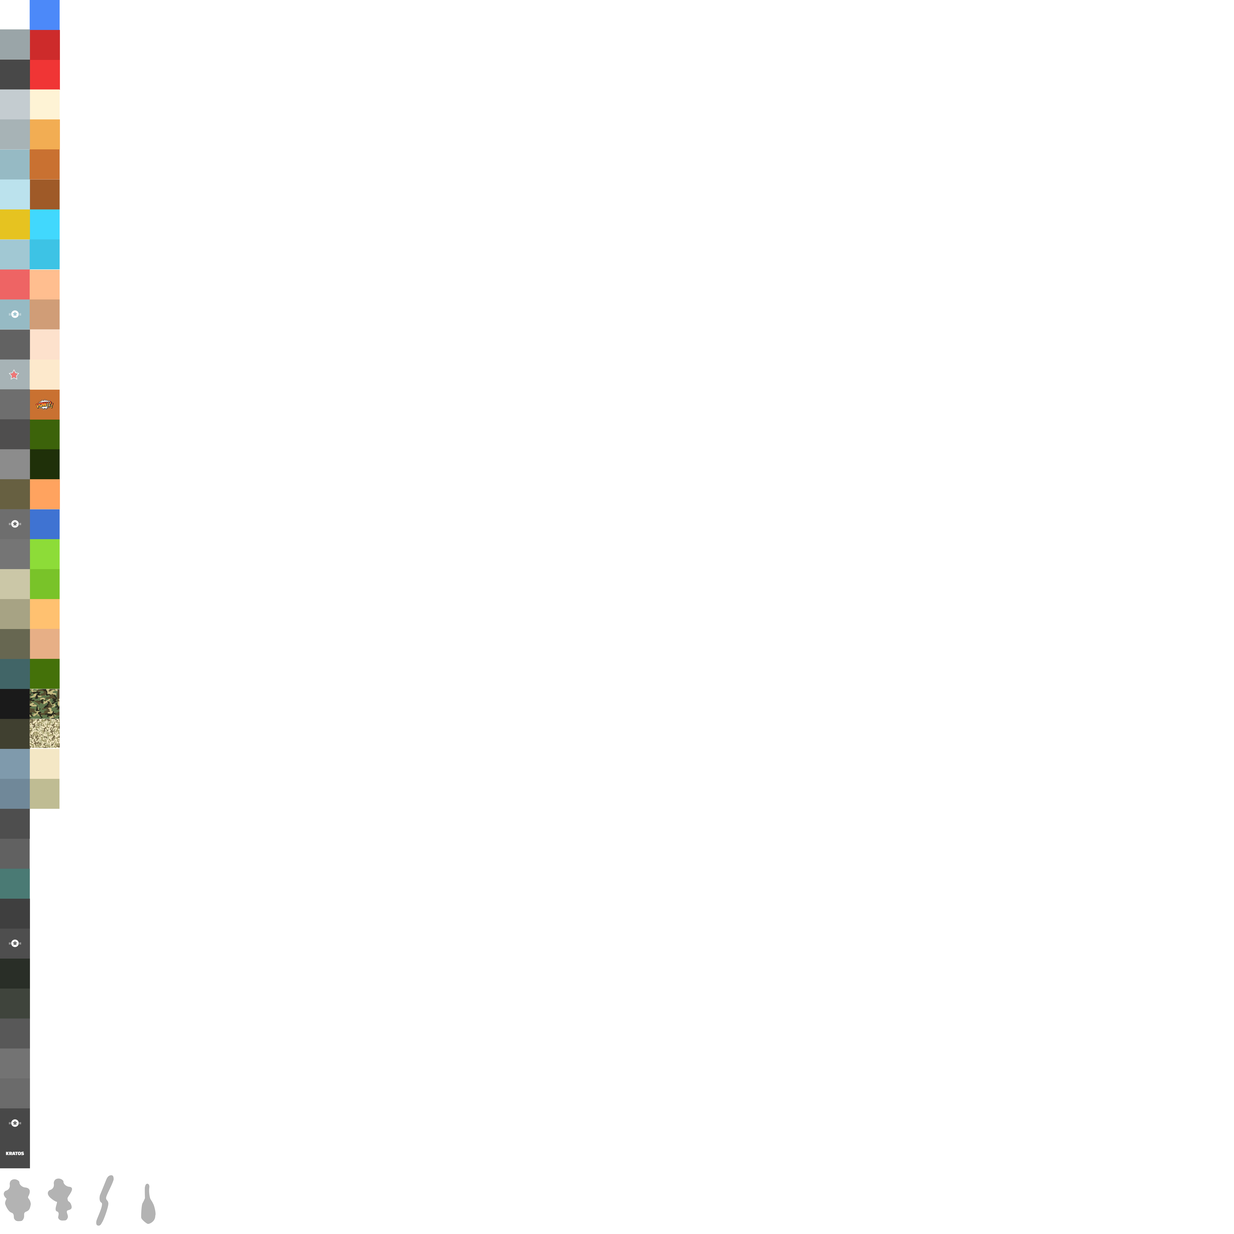
<style>
.page{position:relative;width:1234px;height:1234px;background:#ffffff}
.page>*{position:absolute;margin:0}
.t1{font:9px "ChangaOne";letter-spacing:-0.001em;color:#ffffff}
</style>
<div class="page">
<p class="t1" style="left:6px;top:1151px;width:18px;height:4px">KRATOS</p>
</div>
